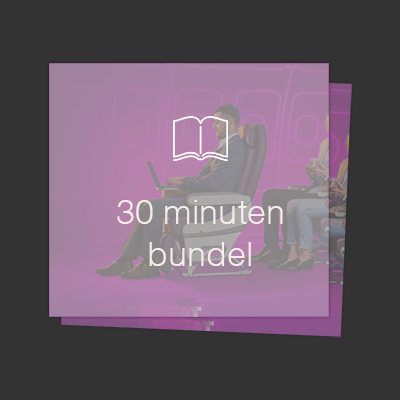
<style>
.page{position:relative;width:400px;height:400px;background:#333333}
.page>*{position:absolute;margin:0}
.t1{font:34.3px "Helvetica-Light";color:#f4eee8}
</style>
<div class="page">
<p class="t1" style="left:117px;top:200px;width:166px;height:66px;text-align:center">30 minuten <br>bundel</p>
</div>
